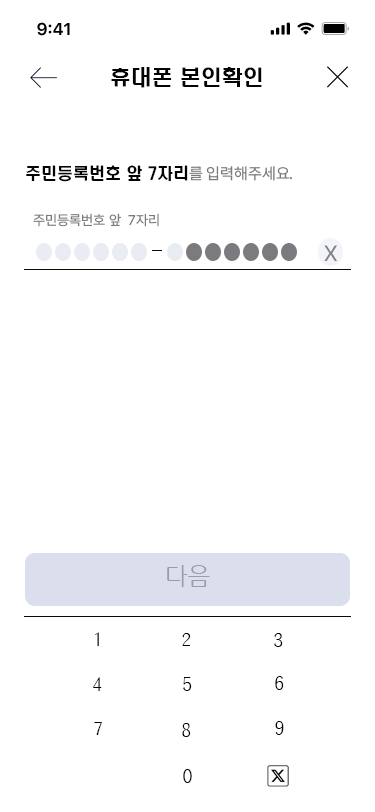
<style>
.page{position:relative;width:375px;height:812px;background:#ffffff}
.page>*{position:absolute;margin:0}
.t1{font:21px "H2hdrM";color:#030303}
.t2{font:16px "H2hdrM";color:#030303}
.t3{font:16px "Pretendard-Regular";color:#7b7b7f}
.t4{font:14px "Pretendard-Regular";color:#7b7b7f}
.t5{font:22px "Pretendard-Regular";color:#818286}
.t6{font:24px "NanumGothic";color:#9c9da3}
.t7{font:18px "H2gprM"}
.t8{font:18px "H2gprM";color:#030303}
</style>
<div class="page">
<p class="t1" style="left:111px;top:67px;width:151px;height:21px">휴대폰 본인확인</p>
<p class="t2" style="left:26px;top:165px;width:267px;height:17px">주민등록번호 앞 7자리<span class="t3">를 입력해주세요.</span></p>
<p class="t4" style="left:33px;top:213px;width:126px;height:14px">주민등록번호 앞  7자리</p>
<p class="t5" style="left:324px;top:245px;width:13px;height:17px">X</p>
<p class="t6" style="left:167px;top:565px;width:43px;height:22px">다음</p>
<p class="t7" style="left:95px;top:632px;width:4px;height:15px">1</p>
<p class="t8" style="left:182px;top:633px;width:9px;height:13px">2</p>
<p class="t8" style="left:274px;top:633px;width:9px;height:14px">3</p>
<p class="t8" style="left:93px;top:677px;width:9px;height:14px">4</p>
<p class="t8" style="left:183px;top:677px;width:9px;height:14px">5</p>
<p class="t8" style="left:275px;top:676px;width:9px;height:14px">6</p>
<p class="t8" style="left:94px;top:722px;width:8px;height:13px">7</p>
<p class="t8" style="left:182px;top:723px;width:9px;height:14px">8</p>
<p class="t8" style="left:275px;top:721px;width:9px;height:14px">9</p>
<p class="t8" style="left:183px;top:769px;width:9px;height:14px">0</p>
</div>
